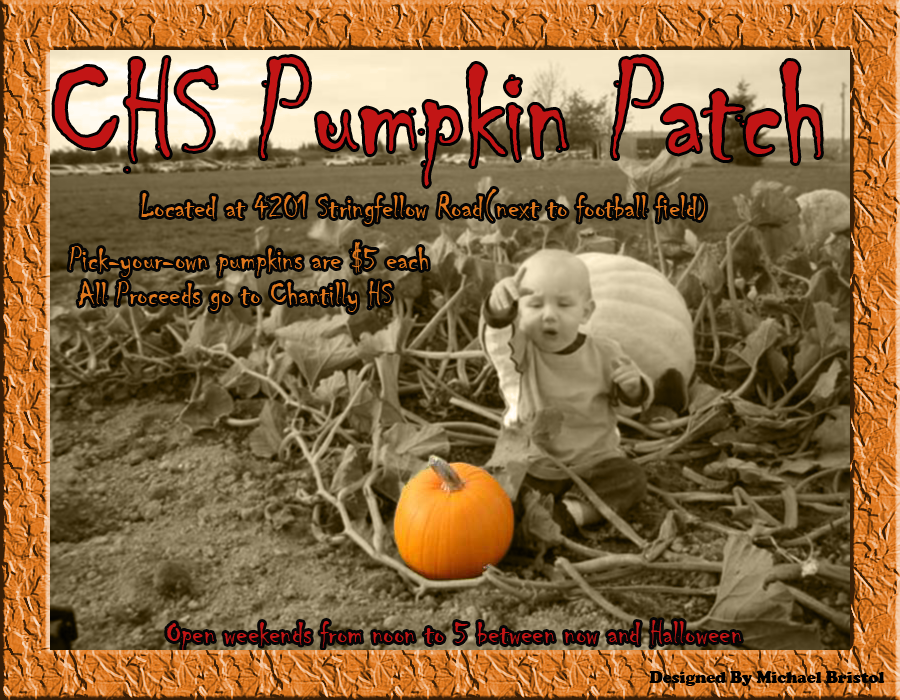
<style>
.page{position:relative;width:900px;height:700px}
.page>*{position:absolute;margin:0}
.t1{font:140.9px "Chiller-Regular";color:#c21515;scale:0.96 1}
.t2{font:33.3px "Chiller-Regular";color:#e1781d}
.t3{font:25px "Chiller-Regular";color:#e1781d}
.t4{font:33.3px "Chiller-Regular";color:#c21515}
.t5{font:16.7px "CooperBlack";color:#000000}
</style>
<div class="page">
<p class="t1" style="left:54px;top:57px;width:767px;height:129px">CHS Pumpkin Patch</p>
<p class="t2" style="left:141px;top:189px;width:565px;height:35px">Located at 4201 Stringfellow Road(next to football field<span class="t3">)</span></p>
<p class="t2" style="left:69px;top:242px;width:359px;height:35px">Pick-your-own pumpkins are $5 each</p>
<p class="t2" style="left:78px;top:281px;width:314px;height:31px">All Proceeds go to Chantilly HS</p>
<p class="t4" style="left:167px;top:620px;width:574px;height:30px">Open weekends from noon to 5 between now and Halloween</p>
<p class="t5" style="left:649px;top:671px;width:236px;height:15px">Designed By Michael Bristol</p>
</div>
